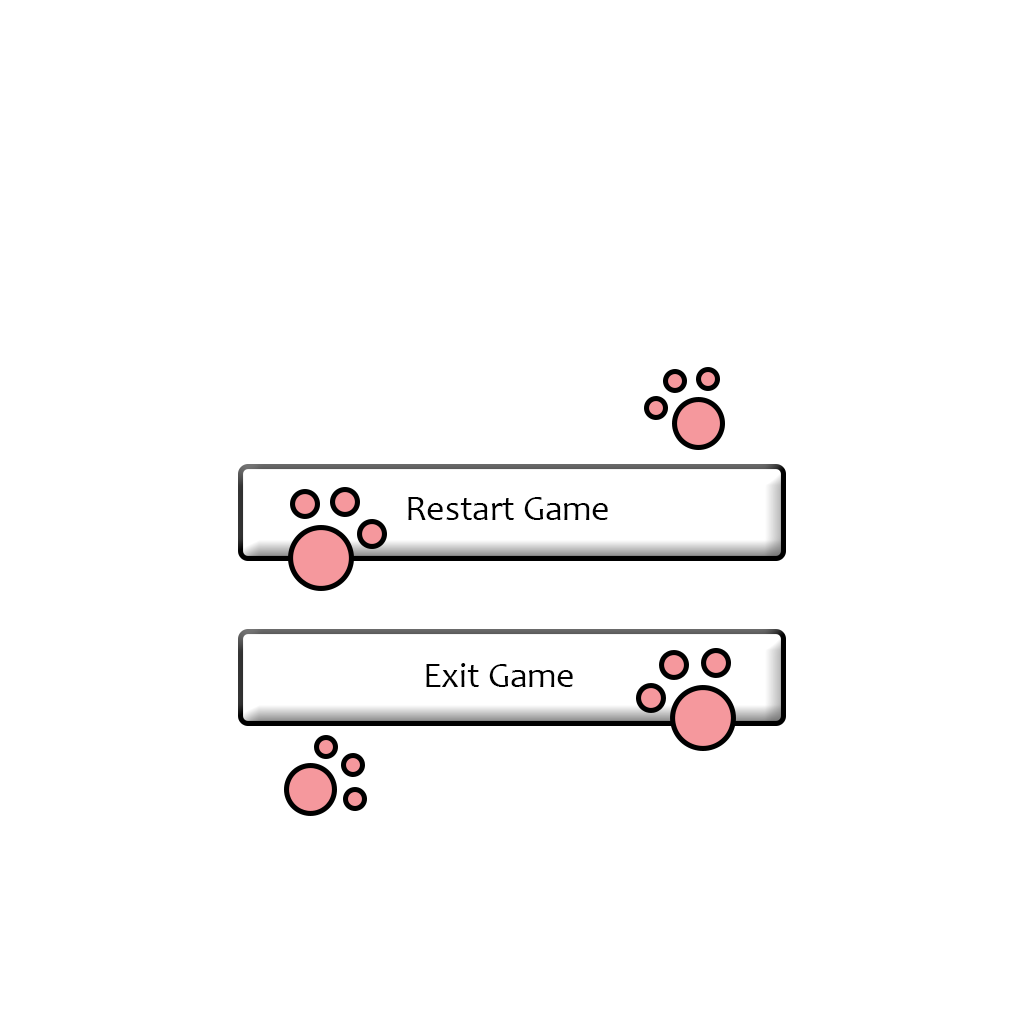
<style>
.page{position:relative;width:1024px;height:1024px;background:#ffffff}
.page>*{position:absolute;margin:0}
.t1{font:35.6px "Candara";color:#000000}
</style>
<div class="page">
<p class="t1" style="left:408px;top:497px;width:200px;height:23px">Restart Game</p>
<p class="t1" style="left:426px;top:663px;width:147px;height:24px">Exit Game</p>
</div>
